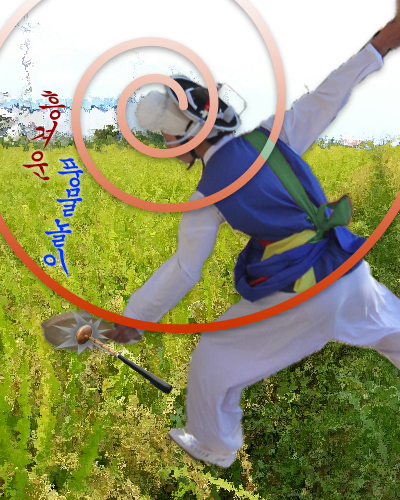
<style>
.page{position:relative;width:400px;height:500px}
.page>*{position:absolute;margin:0}
.t1{font:30px "Gungsuh";color:#990000}
.t2{font:30px "Gungsuh";color:#0033ff}
</style>
<div class="page">
<p class="t1" style="left:22px;top:90px;width:44px;height:91px">흥겨운</p>
<p class="t2" style="left:43px;top:158px;width:41px;height:120px">풍물놀이</p>
</div>
